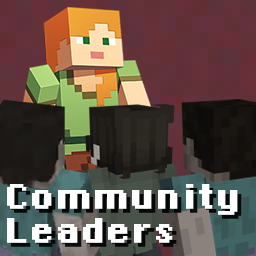
<style>
.page{position:relative;width:256px;height:256px}
.page>*{position:absolute;margin:0}
.t1{font:48px/34px "BlockBlueprint";color:#ffffff;font-weight:bold}
</style>
<div class="page">
<p class="t1" style="left:7px;top:184px;width:231px;height:59px">Community<br>Leaders</p>
</div>
